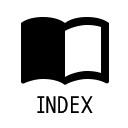
<style>
.page{position:relative;width:128px;height:128px;background:#ffffff}
.page>*{position:absolute;margin:0}
.t1{font:24px "MonoSpatial";color:#000000}
</style>
<div class="page">
<p class="t1" style="left:37px;top:96px;width:56px;height:17px">INDEX</p>
</div>
